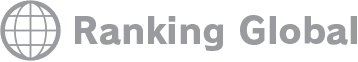
<style>
.page{position:relative;width:358px;height:62px;background:#ffffff}
.page>*{position:absolute;margin:0}
.t1{font:36px "RodinPro-EB";color:#999b9e}
</style>
<div class="page">
<p class="t1" style="left:75px;top:15px;width:282px;height:36px">Ranking Global</p>
</div>
